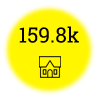
<style>
.page{position:relative;width:100px;height:100px;background:#fff600}
.page>*{position:absolute;margin:0}
.t1{font:36px "RobotoSlab-Regular";color:#000000}
</style>
<div class="page">
<p class="t1" style="left:19px;top:26px;width:60px;height:17px">159.8k</p>
</div>
